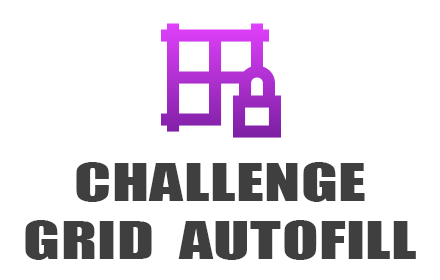
<style>
.page{position:relative;width:440px;height:280px;background:#ffffff}
.page>*{position:absolute;margin:0}
.t1{font:48px "Impact";letter-spacing:0.005em;color:#3f3f3f;text-transform:uppercase;scale:1.4 1}
</style>
<div class="page">
<p class="t1" style="left:25px;top:162px;width:391px;height:98px;text-align:center">Challenge<br>Grid  Autofill</p>
</div>
